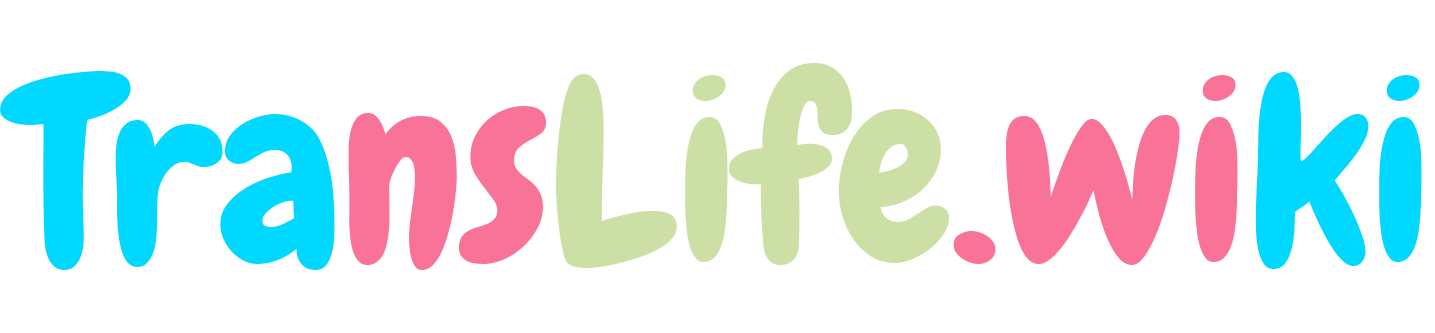
<style>
.page{position:relative;width:1435px;height:333px;background:#ffffff}
.page>*{position:absolute;margin:0}
.t1{font:260px "Chewy-Regular";color:#cce0a5}
.t2{font:260px "Chewy-Regular";color:#00d8ff}
.t3{font:260px "Chewy-Regular";color:#f97399}
</style>
<div class="page">
<p class="t1" style="left:0px;top:63px;width:1422px;height:207px"><span class="t2">Tra</span><span class="t3">ns</span>Life<span class="t3">.wi</span><span class="t2">ki</span></p>
</div>
